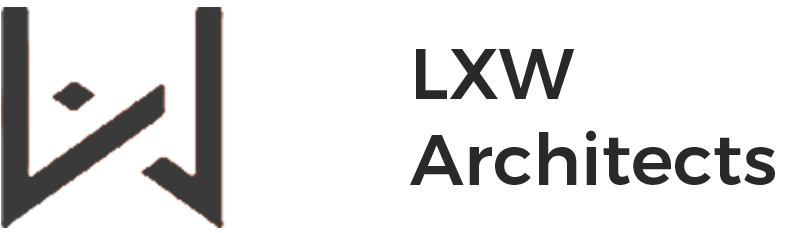
<style>
.page{position:relative;width:789px;height:233px;background:#ffffff}
.page>*{position:absolute;margin:0}
.t1{font:71.4px "Montserrat-Medium";color:#292929}
</style>
<div class="page">
<p class="t1" style="left:410px;top:49px;width:365px;height:136px;text-align:justify">LXW<br>Architects</p>
</div>
